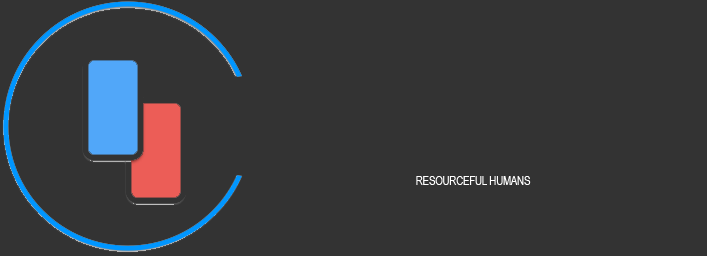
<style>
.page{position:relative;width:707px;height:256px;background:#333333}
.page>*{position:absolute;margin:0}
.t1{font:11.5px "ArialNarrow";color:#ffffff}
</style>
<div class="page">
<p class="t1" style="left:416px;top:176px;width:115px;height:9px">RESOURCEFUL HUMANS</p>
</div>
